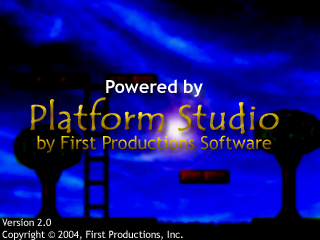
<style>
.page{position:relative;width:320px;height:240px;background:#000000}
.page>*{position:absolute;margin:0}
.t1{font:17.9px "TrebuchetMS-Bold";color:#ffffff}
.t2{font:35.9px "TempusSansITC";font-weight:bold}
.t3{font:17.9px "TrebuchetMS"}
.t4{font:10px "TrebuchetMS";color:#e7edf8}
</style>
<div class="page">
<p class="t1" style="left:106px;top:79px;width:97px;height:18px">Powered by</p>
<p class="t2" style="left:30px;top:97px;width:249px;height:37px">Platform Studio</p>
<p class="t3" style="left:37px;top:135px;width:235px;height:18px">by First Productions Software</p>
<p class="t4" style="left:2px;top:218px;width:181px;height:22px">Version 2.0<br>Copyright © 2004, First Productions, Inc.</p>
</div>
